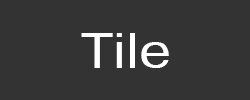
<style>
.page{position:relative;width:250px;height:100px;background:#333333}
.page>*{position:absolute;margin:0}
.t1{font:48px "Helvetica";color:#ffffff;scale:1.2 1}
</style>
<div class="page">
<p class="t1" style="left:81px;top:33px;width:88px;height:35px">Tile</p>
</div>
